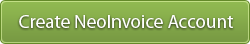
<style>
.page{position:relative;width:250px;height:44px}
.page>*{position:absolute;margin:0}
.t1{font:19px "MyriadPro-Regular";color:#ffffff}
</style>
<div class="page">
<p class="t1" style="left:19px;top:15px;width:214px;height:13px">Create NeoInvoice Account</p>
</div>
